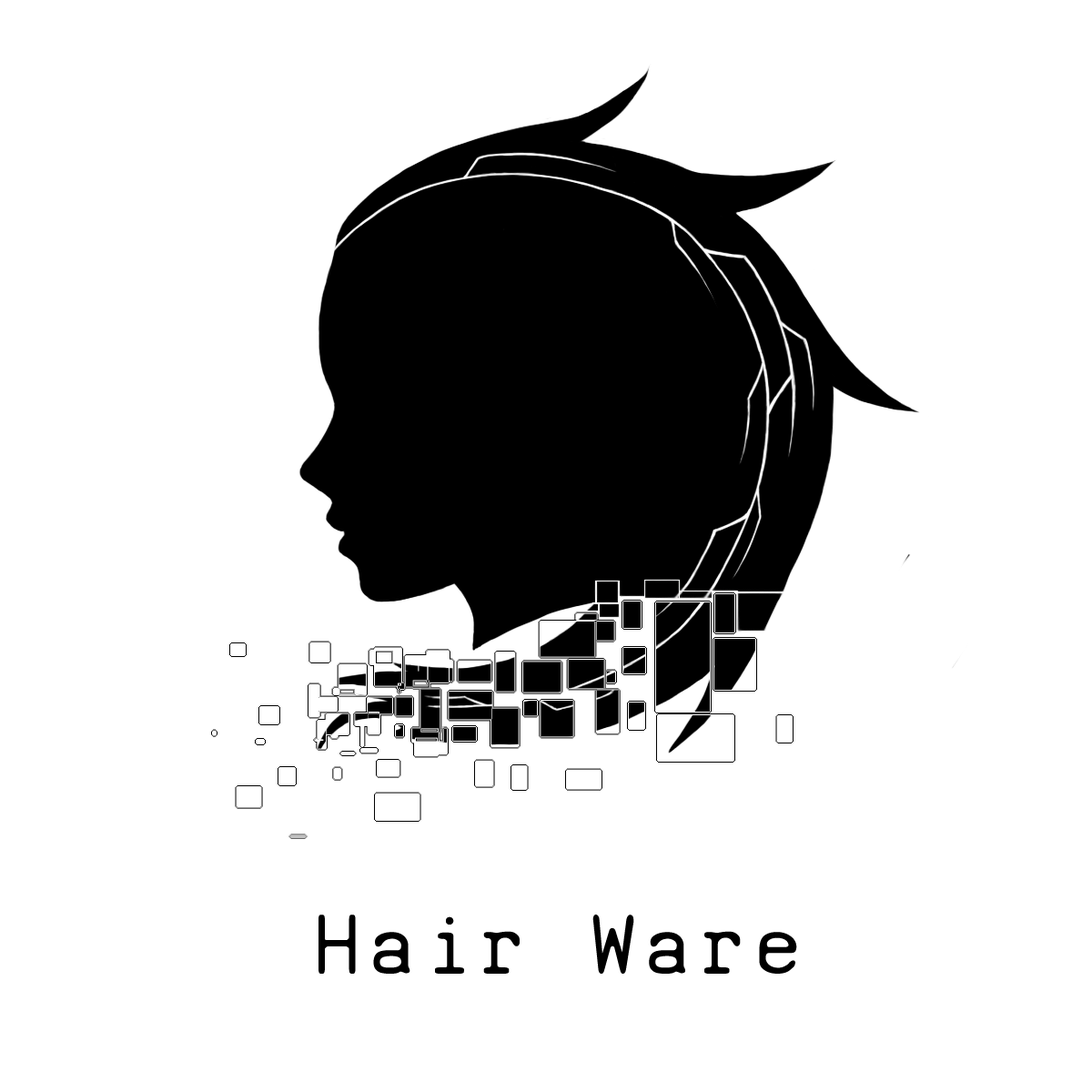
<style>
.page{position:relative;width:1092px;height:1092px;background:#ffffff}
.page>*{position:absolute;margin:0}
.t1{font:91px "SVBasicManual";letter-spacing:0.1em;color:#000000}
</style>
<div class="page">
<p class="t1" style="left:318px;top:915px;width:479px;height:59px">Hair Ware</p>
</div>
